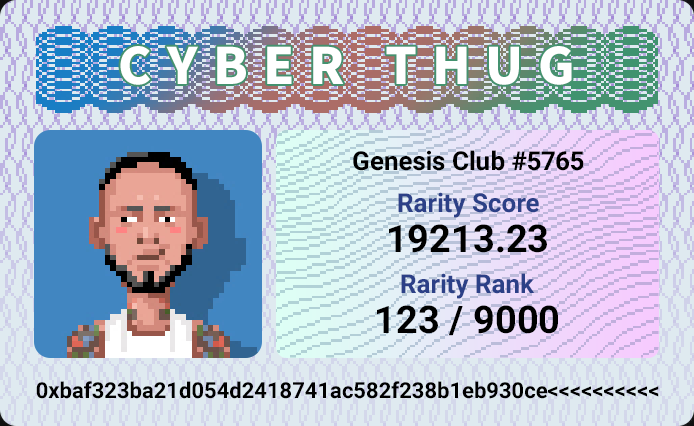
<style>
.page{position:relative;width:694px;height:426px;background:#dfeaf0}
.page>*{position:absolute;margin:0}
.t1{font:50px "NotoSansKR-Black";letter-spacing:0.3em;color:#ffffff}
.t2{font:26px "Roboto-Bold";color:#000000}
.t3{font:26px "Roboto-Bold";color:#2c4087}
.t4{font:38px "Roboto-Bold";color:#000000}
.t5{font:22px "Roboto-Bold";color:#000000}
</style>
<div class="page">
<p class="t1" style="left:120px;top:46px;width:452px;height:39px">CYBER THUG</p>
<p class="t2" style="left:353px;top:150px;width:231px;height:21px">Genesis Club #5765</p>
<p class="t3" style="left:398px;top:192px;width:141px;height:26px">Rarity Score</p>
<p class="t4" style="left:389px;top:224px;width:158px;height:29px">19213.23</p>
<p class="t3" style="left:401px;top:273px;width:134px;height:26px">Rarity Rank</p>
<p class="t4" style="left:377px;top:305px;width:181px;height:31px">123 / 9000</p>
<p class="t5" style="left:36px;top:381px;width:623px;height:18px">0xbaf323ba21d054d2418741ac582f238b1eb930ce&lt;&lt;&lt;&lt;&lt;&lt;&lt;&lt;&lt;&lt;</p>
</div>
